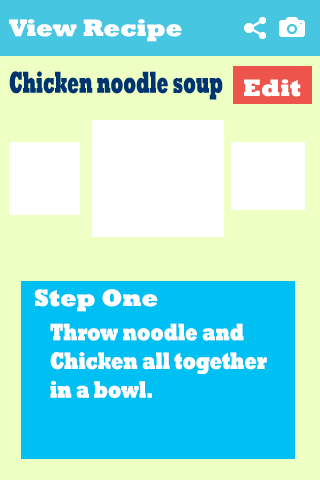
<style>
.page{position:relative;width:320px;height:480px;background:#edffc3}
.page>*{position:absolute;margin:0}
.t1{font:24px "Rockwell-ExtraBold";color:#ffffff}
.t2{font:23.9px "Rockwell-ExtraBold";color:#ffffff;scale:0.74 1}
</style>
<div class="page">
<p class="t1" style="left:9px;top:19px;width:173px;height:23px">View Recipe</p>
<p class="t1" style="left:34px;top:289px;width:124px;height:23px">Step One</p>
<p class="t2" style="left:50px;top:323px;width:217px;height:75px">Throw noodle and <br>Chicken all together <br>in a bowl.</p>
</div>
